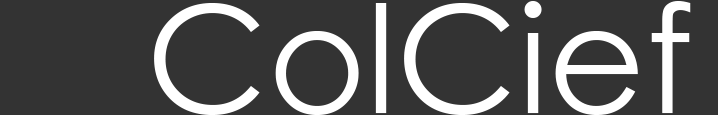
<style>
.page{position:relative;width:718px;height:115px;background:#333333}
.page>*{position:absolute;margin:0}
.t1{font:150px "CenturyGothic";color:#ffffff}
</style>
<div class="page">
<p class="t1" style="left:154px;top:1px;width:537px;height:114px">ColCief</p>
</div>
